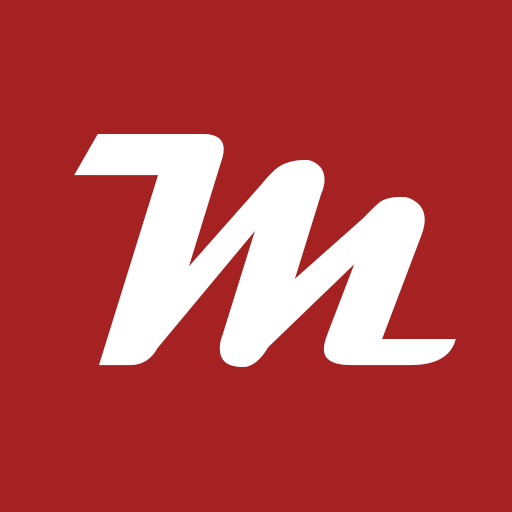
<style>
.page{position:relative;width:512px;height:512px;background:#a62121}
.page>*{position:absolute;margin:0}
.t1{font:336px "Magneto-Bold";color:#ffffff}
</style>
<div class="page">
<p class="t1" style="left:74px;top:134px;width:382px;height:233px">M</p>
</div>
